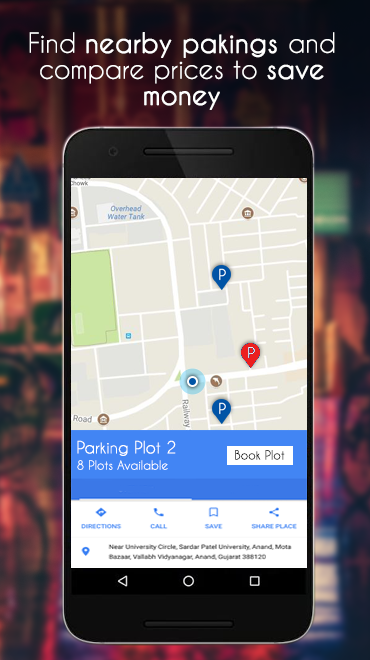
<style>
.page{position:relative;width:370px;height:660px}
.page>*{position:absolute;margin:0}
.t1{font:26px/26px "CaviarDreams";color:#ffffff}
.t2{font:26px/26px "CaviarDreams";color:#ffffff;font-weight:bold}
.t3{font:16px "CaviarDreams";color:#ffffff}
.t4{font:12px "CaviarDreams";color:#ffffff}
.t5{font:12px "CaviarDreams";color:#000000}
</style>
<div class="page">
<p class="t1" style="left:29px;top:32px;width:306px;height:78px;text-align:center">Find <span class="t2">nearby pakings </span>and compare prices to <span class="t2">save money</span></p>
<p class="t3" style="left:77px;top:440px;width:99px;height:16px">Parking Plot 2</p>
<p class="t4" style="left:77px;top:460px;width:91px;height:10px">8 Plots Available</p>
<p class="t5" style="left:235px;top:450px;width:50px;height:10px">Book Plot</p>
</div>
